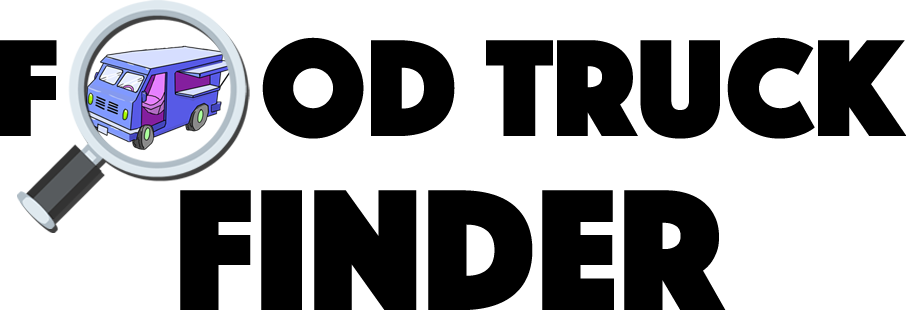
<style>
.page{position:relative;width:906px;height:310px;background:#ffffff}
.page>*{position:absolute;margin:0}
.t1{font:143.5px "Phosphate-Solid";color:#000000}
.t2{font:179.3px "Phosphate-Solid";color:#000000}
</style>
<div class="page">
<p class="t1" style="left:0px;top:37px;width:907px;height:102px">F       OD TRUCK</p>
<p class="t2" style="left:180px;top:190px;width:546px;height:120px">Finder</p>
</div>
